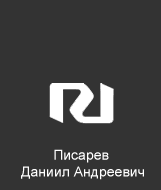
<style>
.page{position:relative;width:161px;height:190px;background:#333333}
.page>*{position:absolute;margin:0}
.t1{font:14px "ArialMT";color:#ffffff}
</style>
<div class="page">
<p class="t1" style="left:21px;top:149px;width:123px;height:31px;text-align:center">Писарев <br>Даниил Андреевич</p>
</div>
